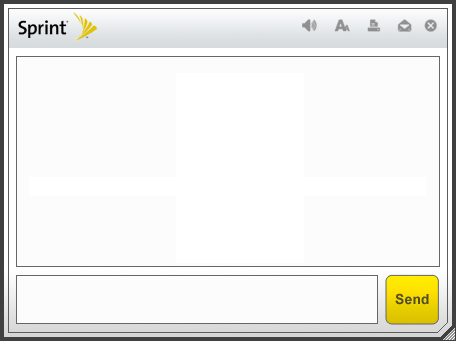
<style>
.page{position:relative;width:456px;height:341px;background:#fcfcfc}
.page>*{position:absolute;margin:0}
.t1{font:14px "Arial-BoldMT";letter-spacing:0.01em;color:#534f2a}
</style>
<div class="page">
<p class="t1" style="left:395px;top:293px;width:34px;height:12px">Send</p>
</div>
